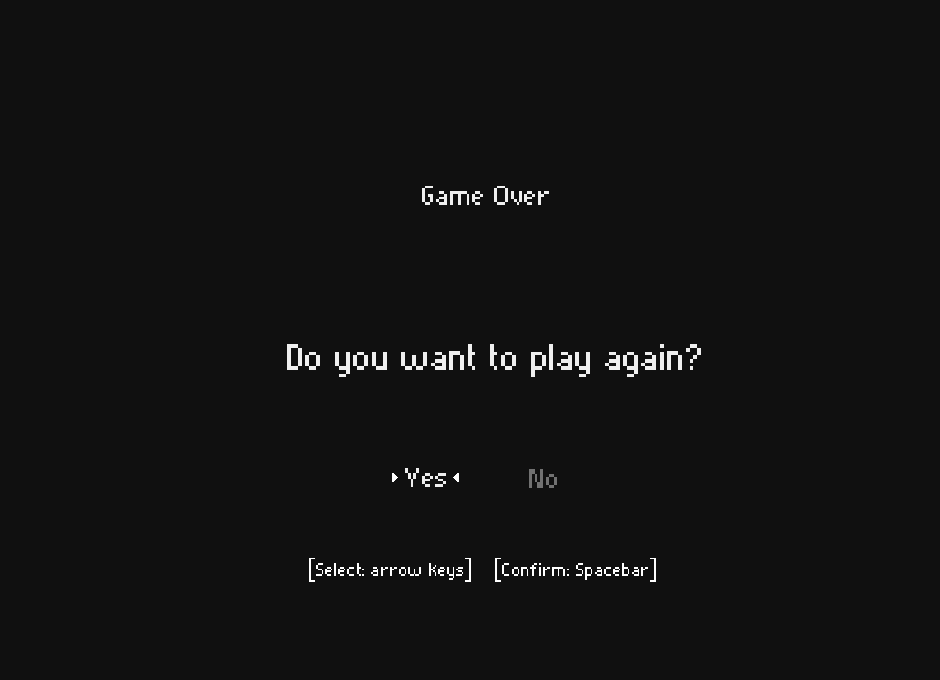
<style>
.page{position:relative;width:940px;height:680px;background:#101010}
.page>*{position:absolute;margin:0}
.t1{font:36px "Pixelade";color:#efefef}
.t2{font:48px "Pixelade";color:#efefef}
.t3{font:36px "Pixelade";color:#717171}
.t4{font:24px "Pixelade";color:#ffffff}
</style>
<div class="page">
<p class="t1" style="left:422px;top:186px;width:127px;height:19px">Game Over</p>
<p class="t2" style="left:287px;top:344px;width:414px;height:33px">Do you want to play again?</p>
<p class="t1" style="left:405px;top:468px;width:41px;height:19px">Yes</p>
<p class="t3" style="left:529px;top:469px;width:28px;height:19px">No</p>
<p class="t4" style="left:309px;top:558px;width:347px;height:24px">[Select: arrow keys]    [Confirm: Spacebar]</p>
</div>
